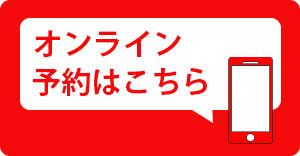
<style>
.page{position:relative;width:300px;height:156px;background:#f30a0b}
.page>*{position:absolute;margin:0}
.t1{font:30px "KozGoPr6N-Bold";color:#f30a0b}
</style>
<div class="page">
<p class="t1" style="left:34px;top:30px;width:147px;height:27px">オンライン</p>
<p class="t1" style="left:32px;top:67px;width:175px;height:29px">予約はこちら</p>
</div>
